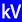
<style>
.page{position:relative;width:22px;height:22px;background:#0000ff}
.page>*{position:absolute;margin:0}
.t1{font:18px "AdobeHeitiStd-Regular";color:#ffffff}
</style>
<div class="page">
<p class="t1" style="left:2px;top:3px;width:20px;height:16px">kV</p>
</div>
